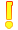
<style>
.page{position:relative;width:18px;height:30px;background:#ffffff}
.page>*{position:absolute;margin:0}
.t1{font:33.3px "NotoSansCJKkr-Bold";color:#fffd1d}
</style>
<div class="page">
<p class="t1" style="left:6px;top:2px;width:6px;height:26px">!</p>
</div>
